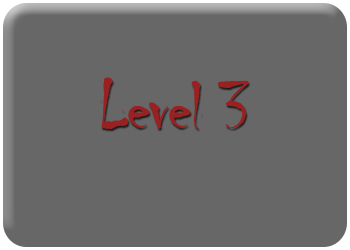
<style>
.page{position:relative;width:350px;height:250px;background:#676767}
.page>*{position:absolute;margin:0}
.t1{font:71.8px "Chiller-Regular";letter-spacing:-0.025em;color:#992122}
</style>
<div class="page">
<p class="t1" style="left:100px;top:77px;width:149px;height:52px">Level 3</p>
</div>
